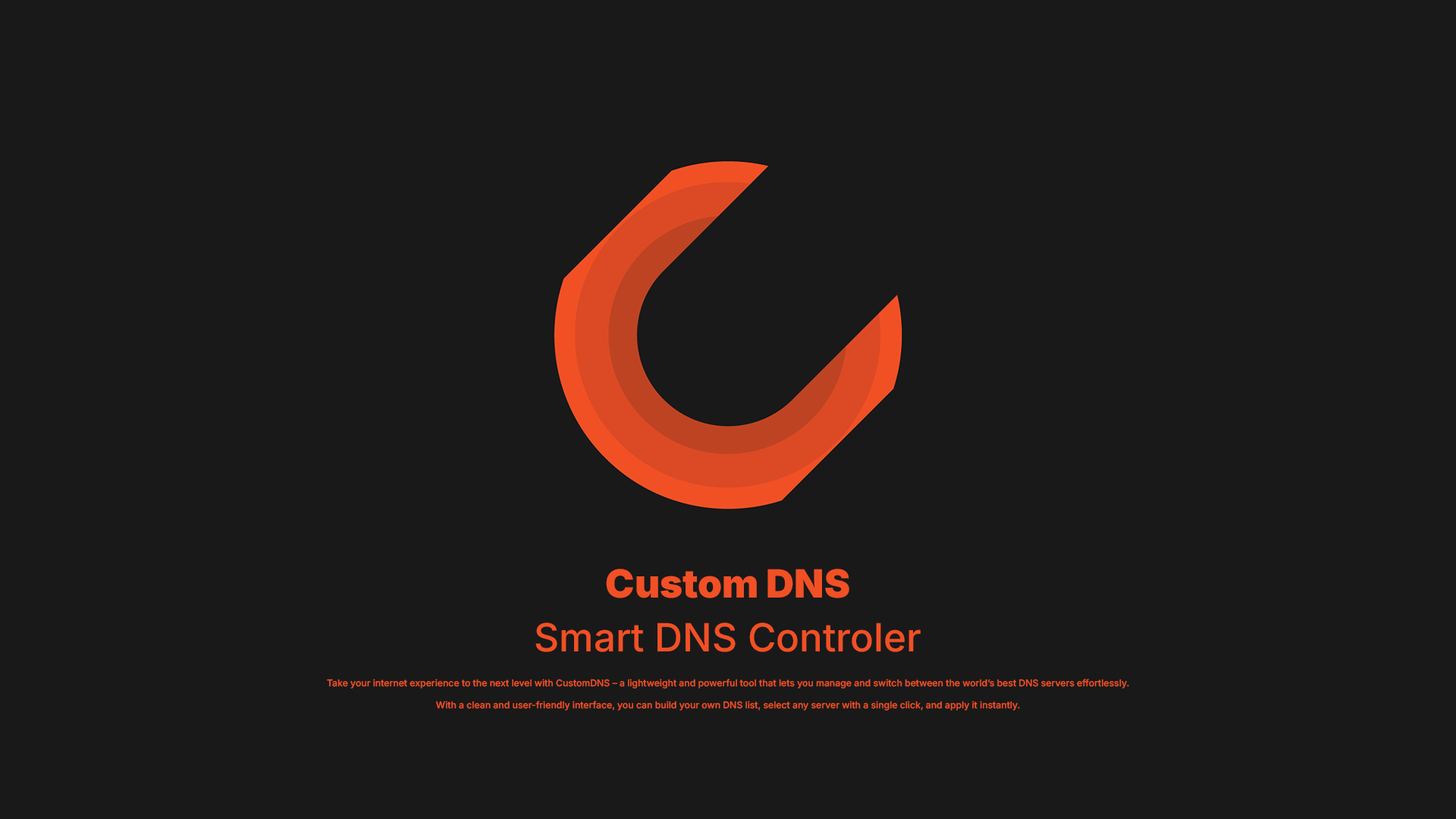
<style>
.page{position:relative;width:1456px;height:819px;background:#191919}
.page>*{position:absolute;margin:0}
.t1{font:38.8px/53.8px "Inter-Medium";color:#f15025}
.t2{font:38.8px/53.8px "Inter-Black";color:#f15025}
.t3{font:9.3px "Inter-Medium";color:#f15025}
</style>
<div class="page">
<p class="t1" style="left:535px;top:569px;width:386px;height:83px;text-align:center"><span class="t2">Custom DNS</span> <br>Smart DNS Controler</p>
<p class="t3" style="left:327px;top:679px;width:802px;height:32px;text-align:center">Take your internet experience to the next level with CustomDNS – a lightweight and powerful tool that lets you manage and switch between the world’s best DNS servers effortlessly.<br><br>With a clean and user-friendly interface, you can build your own DNS list, select any server with a single click, and apply it instantly.</p>
</div>
